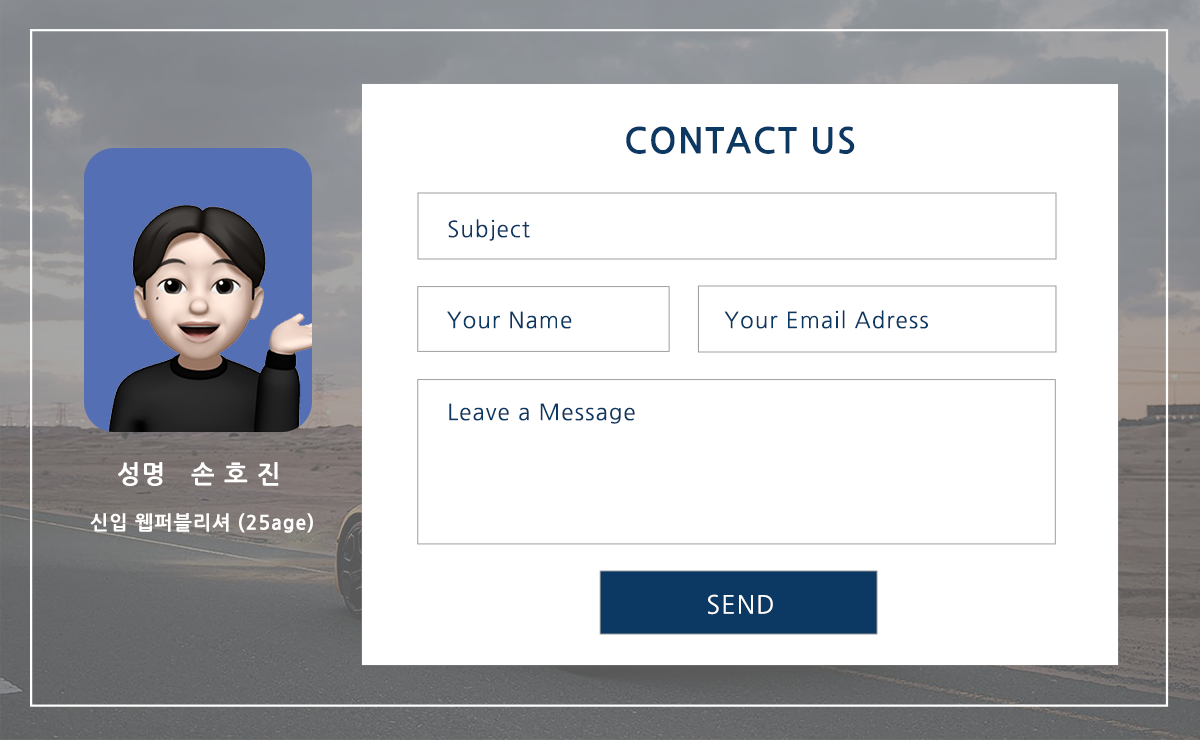
<style>
.page{position:relative;width:1200px;height:740px;background:#ffffff}
.page>*{position:absolute;margin:0}
.t1{font:34.7px "NanumGothicBold";letter-spacing:0.05em;color:#0c3963}
.t2{font:22.2px "NanumGothic";letter-spacing:0.05em;color:#0c3963}
.t3{font:25px "NanumGothicBold";letter-spacing:0.05em;color:#ffffff}
.t4{font:19.4px "NanumGothicBold";letter-spacing:0.05em;color:#ffffff}
.t5{font:25px "NanumGothic";letter-spacing:0.05em;color:#ffffff}
</style>
<div class="page">
<p class="t1" style="left:626px;top:126px;width:229px;height:28px">CONTACT US</p>
<p class="t2" style="left:448px;top:219px;width:82px;height:22px">Subject</p>
<p class="t2" style="left:447px;top:311px;width:125px;height:18px">Your Name</p>
<p class="t2" style="left:724px;top:310px;width:204px;height:19px">Your Email Adress</p>
<p class="t2" style="left:449px;top:403px;width:186px;height:21px">Leave a Message</p>
<p class="t3" style="left:118px;top:462px;width:161px;height:24px">성명   손 호 진</p>
<p class="t4" style="left:90px;top:513px;width:223px;height:20px">신입 웹퍼블리셔 (25age)</p>
<p class="t5" style="left:708px;top:594px;width:65px;height:21px">SEND</p>
</div>
